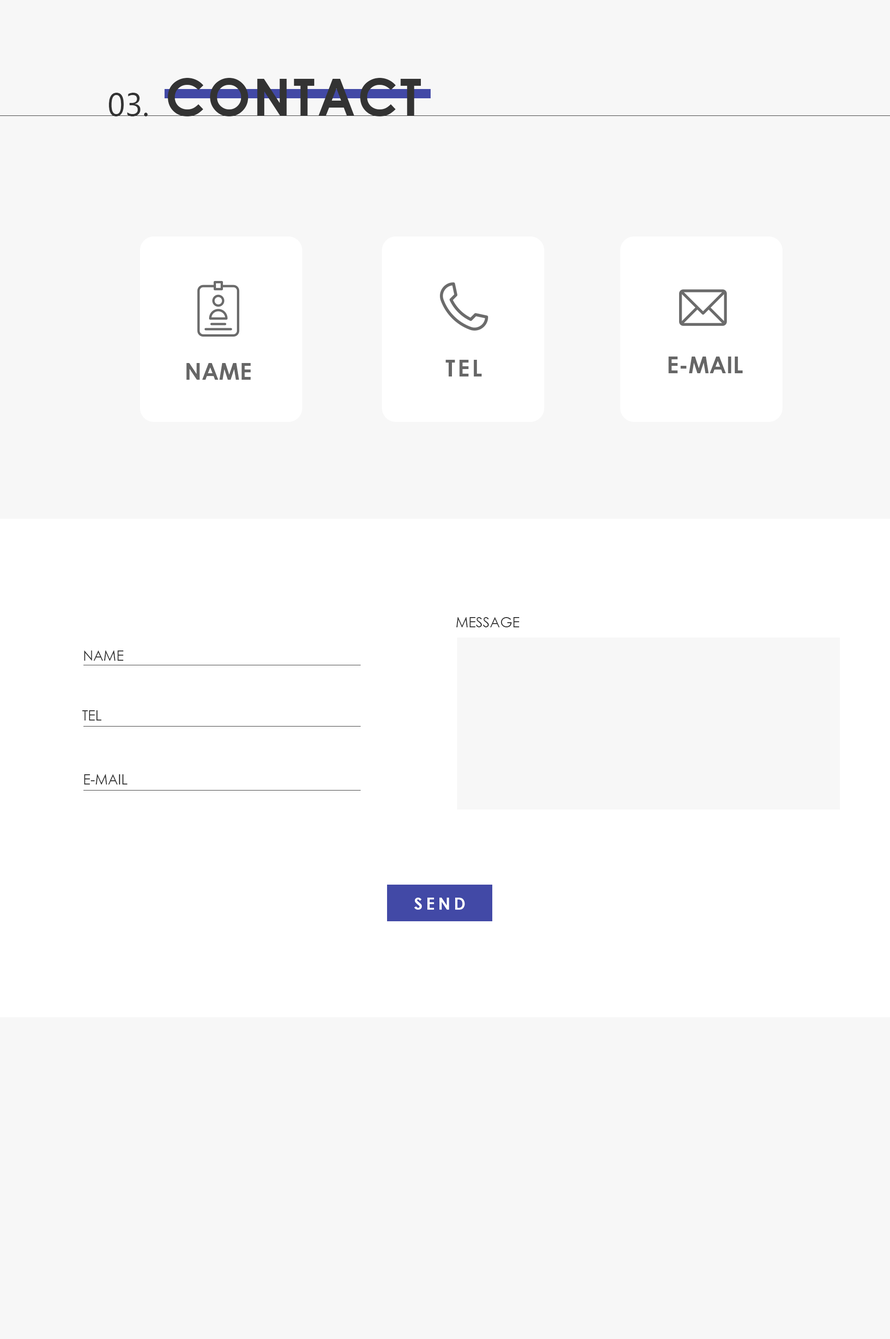
<style>
.page{position:relative;width:890px;height:1339px;background:#f7f7f7}
.page>*{position:absolute;margin:0}
.t1{font:51px "CenturyGothic-Bold";letter-spacing:0.05em;color:#333333;text-transform:uppercase}
.t2{font:32.5px "Ebrima";color:#333333}
.t3{font:23.2px "CenturyGothic-Bold";color:#666666}
.t4{font:23.2px "CenturyGothic-Bold";letter-spacing:0.1em;color:#666666}
.t5{font:13.9px "CenturyGothic";color:#333333}
.t6{font:16.7px "CenturyGothic-Bold";letter-spacing:0.2em;color:#ffffff}
</style>
<div class="page">
<p class="t1" style="left:168px;top:78px;width:253px;height:38px">CONTACT</p>
<p class="t2" style="left:109px;top:93px;width:39px;height:23px">03.</p>
<p class="t3" style="left:186px;top:363px;width:65px;height:17px">NAME</p>
<p class="t4" style="left:446px;top:360px;width:36px;height:17px">TEL</p>
<p class="t3" style="left:669px;top:357px;width:74px;height:16px">E-MAIL</p>
<p class="t5" style="left:456px;top:617px;width:64px;height:10px">MESSAGE</p>
<p class="t5" style="left:84px;top:651px;width:40px;height:10px">NAME</p>
<p class="t5" style="left:82px;top:710px;width:20px;height:11px">TEL</p>
<p class="t5" style="left:84px;top:774px;width:44px;height:11px">E-MAIL</p>
<p class="t6" style="left:414px;top:898px;width:51px;height:12px">SEND</p>
</div>
